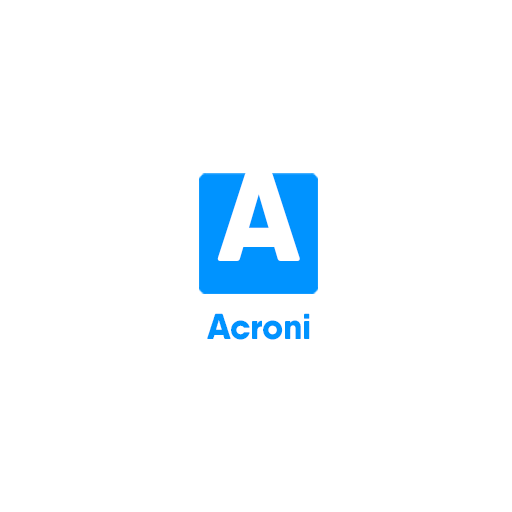
<style>
.page{position:relative;width:512px;height:512px;background:#ffffff}
.page>*{position:absolute;margin:0}
.t1{font:127.4px "QanelasSoftDEMO-ExtraBold";letter-spacing:0.075em;color:#ffffff}
.t2{font:36px "QanelasSoftDEMO-ExtraBold";letter-spacing:-0.01em;color:#0093ff}
</style>
<div class="page">
<p class="t1" style="left:217px;top:171px;width:83px;height:90px">A</p>
<p class="t2" style="left:207px;top:313px;width:103px;height:27px">Acroni</p>
</div>
